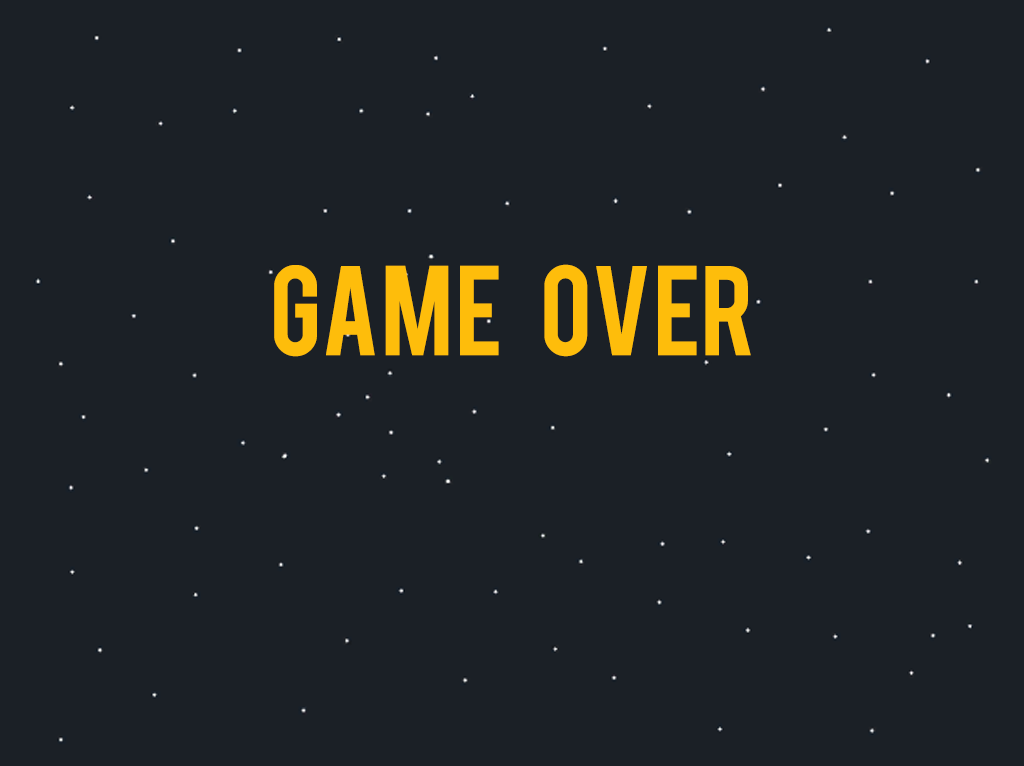
<style>
.page{position:relative;width:1024px;height:766px;background:#1b2026}
.page>*{position:absolute;margin:0}
.t1{font:100px "Bebas";color:#febd0b}
</style>
<div class="page">
<p class="t1" style="left:274px;top:264px;width:477px;height:93px">game    over</p>
</div>
